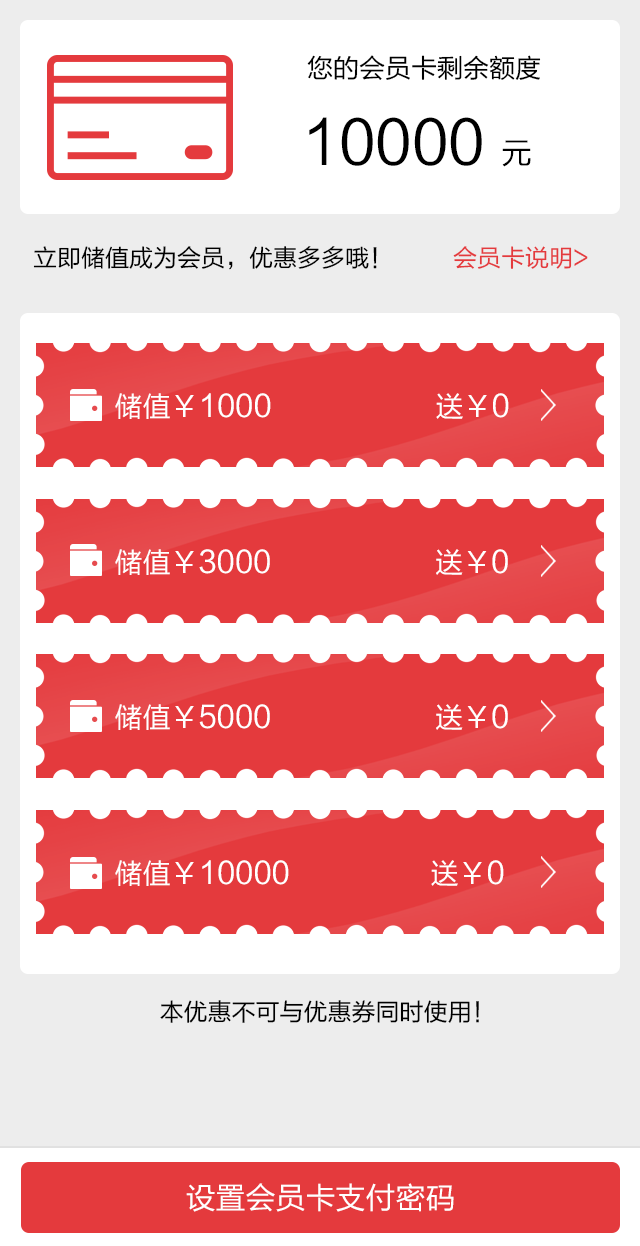
<style>
.page{position:relative;width:640px;height:1246px;background:#ffffff}
.page>*{position:absolute;margin:0}
.t1{font:26px "FZLTHJW--GB1-0";color:#000000}
.t2{font:60px "FZLTHJW--GB1-0";color:#000000}
.t3{font:30px "FZLTHJW--GB1-0";color:#000000}
.t4{font:24px "FZLTHJW--GB1-0";color:#000000}
.t5{font:24px "FZLTHJW--GB1-0";color:#e43a3d}
.t6{font:30px "FZLTHJW--GB1-0";color:#ffffff}
.t7{font:28px "FZLTHJW--GB1-0";color:#ffffff}
</style>
<div class="page">
<p class="t1" style="left:307px;top:55px;width:234px;height:25px">您的会员卡剩余额度</p>
<p class="t2" style="left:309px;top:117px;width:222px;height:50px">10000 <span class="t3">元</span></p>
<p class="t4" style="left:33px;top:246px;width:555px;height:24px">立即储值成为会员，优惠多多哦！         <span class="t5">会员卡说明&gt;</span></p>
<p class="t6" style="left:115px;top:393px;width:394px;height:26px"><span class="t7">  储值￥</span>1000 <span class="t7">                    送￥</span>0</p>
<p class="t6" style="left:115px;top:549px;width:393px;height:26px"><span class="t7">  储值￥</span>3000 <span class="t7">                    送￥</span>0</p>
<p class="t6" style="left:115px;top:704px;width:393px;height:26px"><span class="t7">  储值￥</span>5000 <span class="t7">                    送￥</span>0</p>
<p class="t6" style="left:115px;top:860px;width:389px;height:26px"><span class="t7">  储值￥</span>10000 <span class="t7">                 送￥</span>0</p>
<p class="t4" style="left:160px;top:1000px;width:319px;height:23px">本优惠不可与优惠券同时使用！</p>
<p class="t6" style="left:186px;top:1183px;width:268px;height:29px">设置会员卡支付密码</p>
</div>
